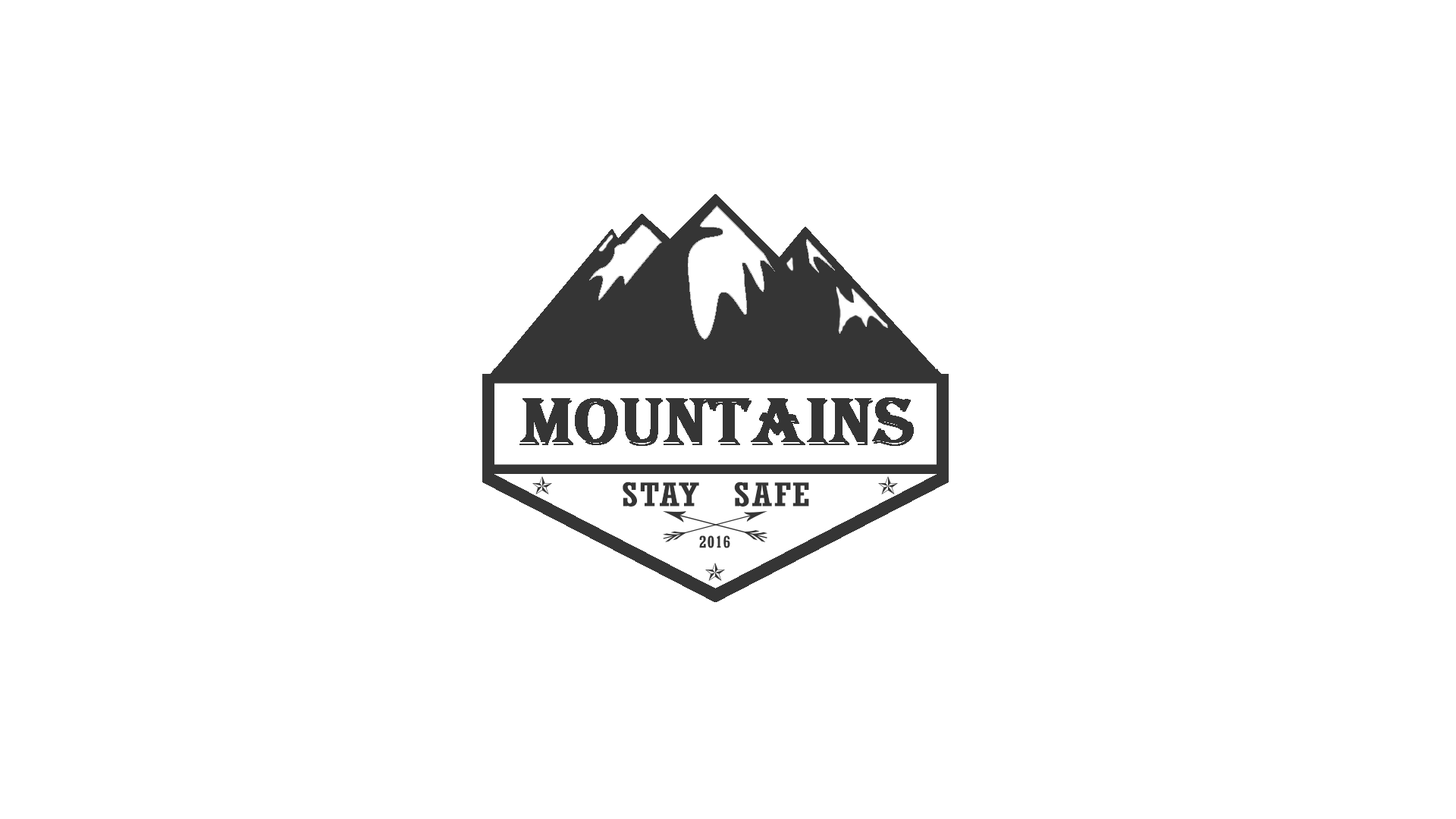
<style>
.page{position:relative;width:1456px;height:819px;background:#ffffff}
.page>*{position:absolute;margin:0}
.t1{font:68.7px "Algerian";color:#353535;font-weight:bold}
.t2{font:31.6px "Rockwell-Condensed";color:#353535;font-weight:bold;scale:1.44 1}
.t3{font:15.8px "Rockwell-Condensed";color:#353535;font-weight:bold;scale:1.28 1}
</style>
<div class="page">
<p class="t1" style="left:519px;top:397px;width:395px;height:49px">MOUNTAINS</p>
<p class="t2" style="left:623px;top:482px;width:186px;height:25px">STAY  SAFE</p>
<p class="t3" style="left:699px;top:535px;width:31px;height:13px">2016</p>
</div>
